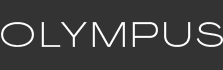
<style>
.page{position:relative;width:223px;height:70px;background:#333333}
.page>*{position:absolute;margin:0}
.t1{font:34.1px "Agrandir-GrandLight";letter-spacing:0.14em;color:#ffffff}
</style>
<div class="page">
<p class="t1" style="left:1px;top:22px;width:222px;height:25px">OLYMPUS</p>
</div>
